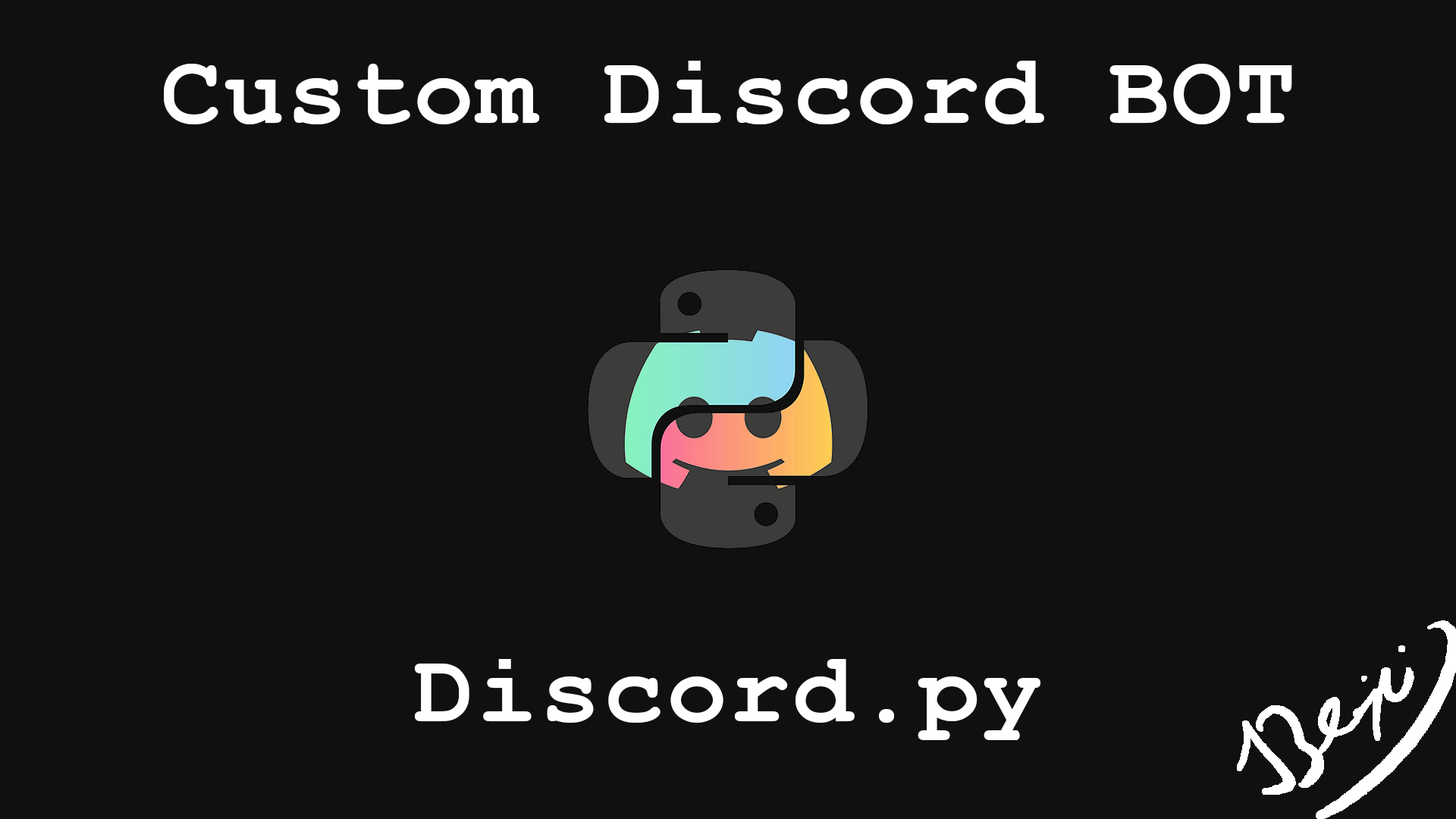
<style>
.page{position:relative;width:1456px;height:819px;background:#101010}
.page>*{position:absolute;margin:0}
.t1{font:101.1px "CourierNewPS-BoldMT";letter-spacing:0.025em;color:#ffffff}
</style>
<div class="page">
<p class="t1" style="left:164px;top:61px;width:1128px;height:63px">Custom Discord BOT</p>
<p class="t1" style="left:414px;top:659px;width:626px;height:81px">Discord.py</p>
</div>
